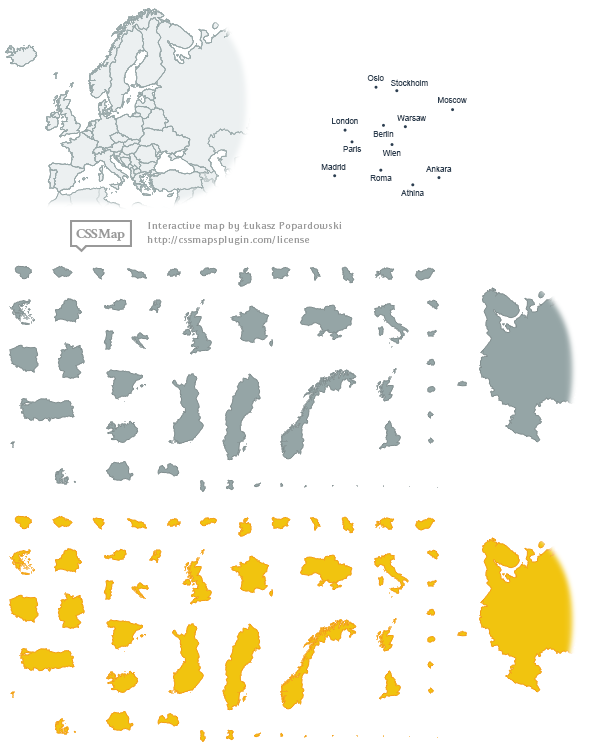
<style>
.page{position:relative;width:592px;height:752px;background:#ffffff}
.page>*{position:absolute;margin:0}
.t1{font:8px "ArialMT";color:#2c3e50}
</style>
<div class="page">
<p class="t1" style="left:367px;top:75px;width:17px;height:6px">Oslo</p>
<p class="t1" style="left:391px;top:79px;width:37px;height:7px">Stockholm</p>
<p class="t1" style="left:438px;top:97px;width:29px;height:6px">Moscow</p>
<p class="t1" style="left:332px;top:118px;width:26px;height:6px">London</p>
<p class="t1" style="left:397px;top:115px;width:29px;height:6px">Warsaw</p>
<p class="t1" style="left:373px;top:131px;width:21px;height:6px">Berlin</p>
<p class="t1" style="left:343px;top:146px;width:19px;height:6px">Paris</p>
<p class="t1" style="left:382px;top:150px;width:19px;height:6px">Wien</p>
<p class="t1" style="left:321px;top:164px;width:25px;height:6px">Madrid</p>
<p class="t1" style="left:426px;top:166px;width:26px;height:6px">Ankara</p>
<p class="t1" style="left:370px;top:175px;width:22px;height:6px">Roma</p>
<p class="t1" style="left:401px;top:189px;width:23px;height:7px">Athina</p>
</div>
